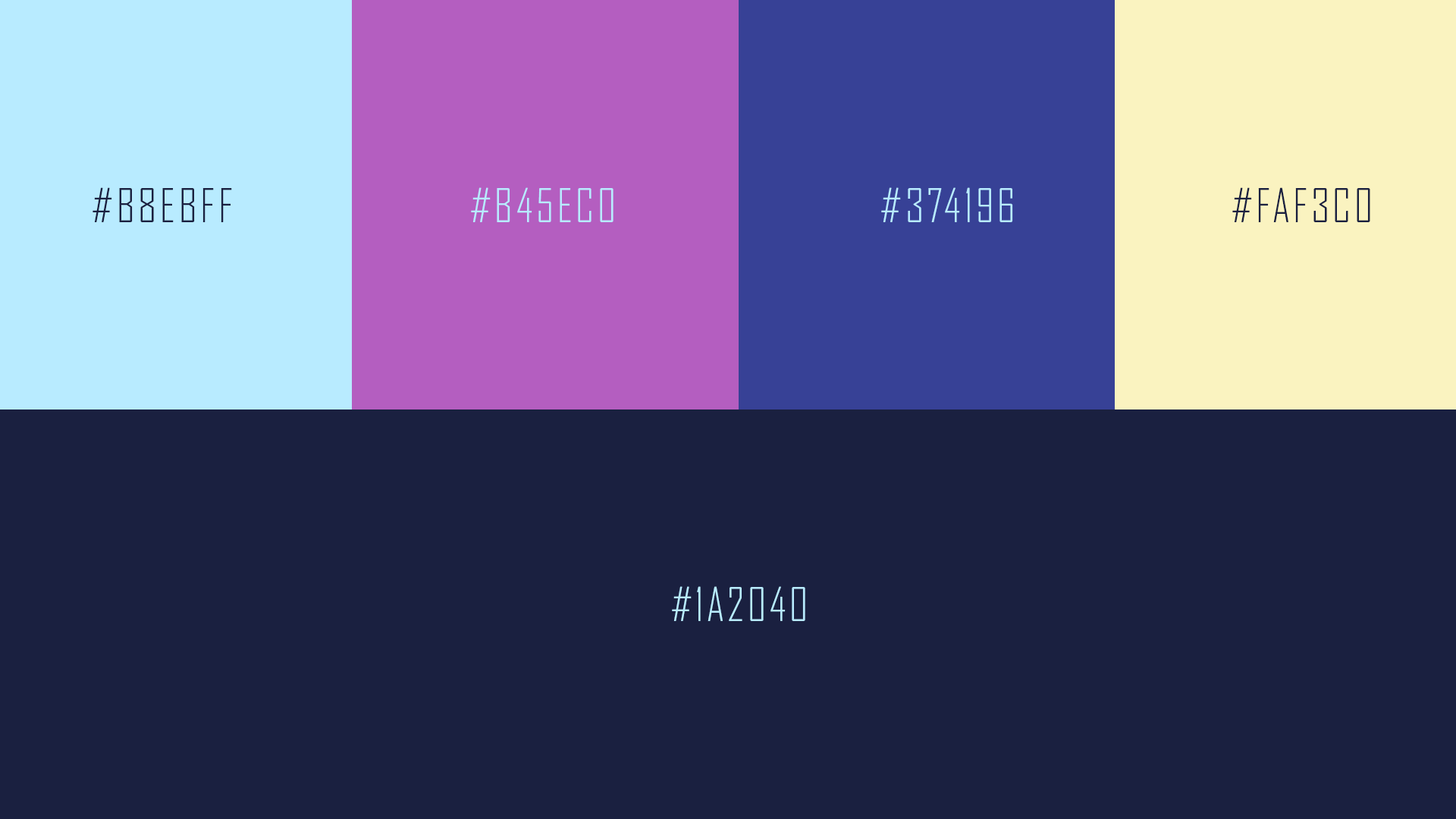
<style>
.page{position:relative;width:1456px;height:819px;background:#1a2040}
.page>*{position:absolute;margin:0}
.t1{font:44.8px "AgencyFB-Light";letter-spacing:0.08em;color:#1a2040}
.t2{font:44.8px "AgencyFB-Light";letter-spacing:0.08em;color:#b8ebff}
</style>
<div class="page">
<p class="t1" style="left:93px;top:187px;width:139px;height:35px">#B8EBFF</p>
<p class="t2" style="left:471px;top:187px;width:142px;height:35px">#B45EC0</p>
<p class="t2" style="left:881px;top:187px;width:132px;height:35px">#374196</p>
<p class="t1" style="left:1232px;top:187px;width:138px;height:35px">#FAF3C0</p>
<p class="t2" style="left:672px;top:586px;width:133px;height:35px">#1A2040</p>
</div>
